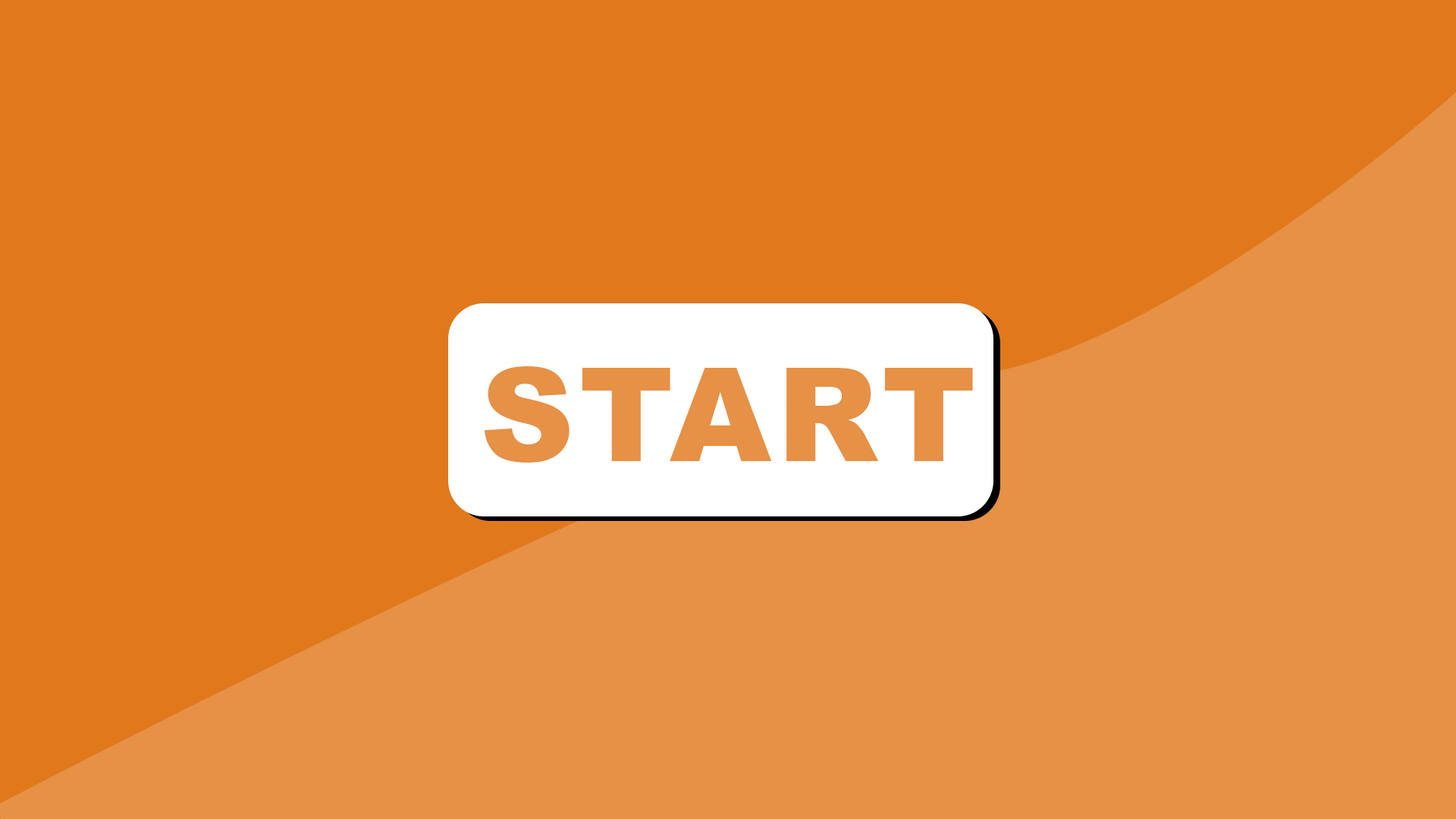
<style>
.page{position:relative;width:1456px;height:819px;background:#e1791c}
.page>*{position:absolute;margin:0}
.t1{font:130.4px "Arial-Black";letter-spacing:0.04em;color:#e69145}
</style>
<div class="page">
<p class="t1" style="left:484px;top:366px;width:489px;height:97px">START</p>
</div>
